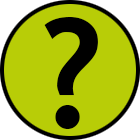
<style>
.page{position:relative;width:140px;height:140px;background:#b8cd07}
.page>*{position:absolute;margin:0}
.t1{font:151.7px "TrebuchetMS-Bold";color:#000000}
</style>
<div class="page">
<p class="t1" style="left:44px;top:17px;width:54px;height:112px">?</p>
</div>
